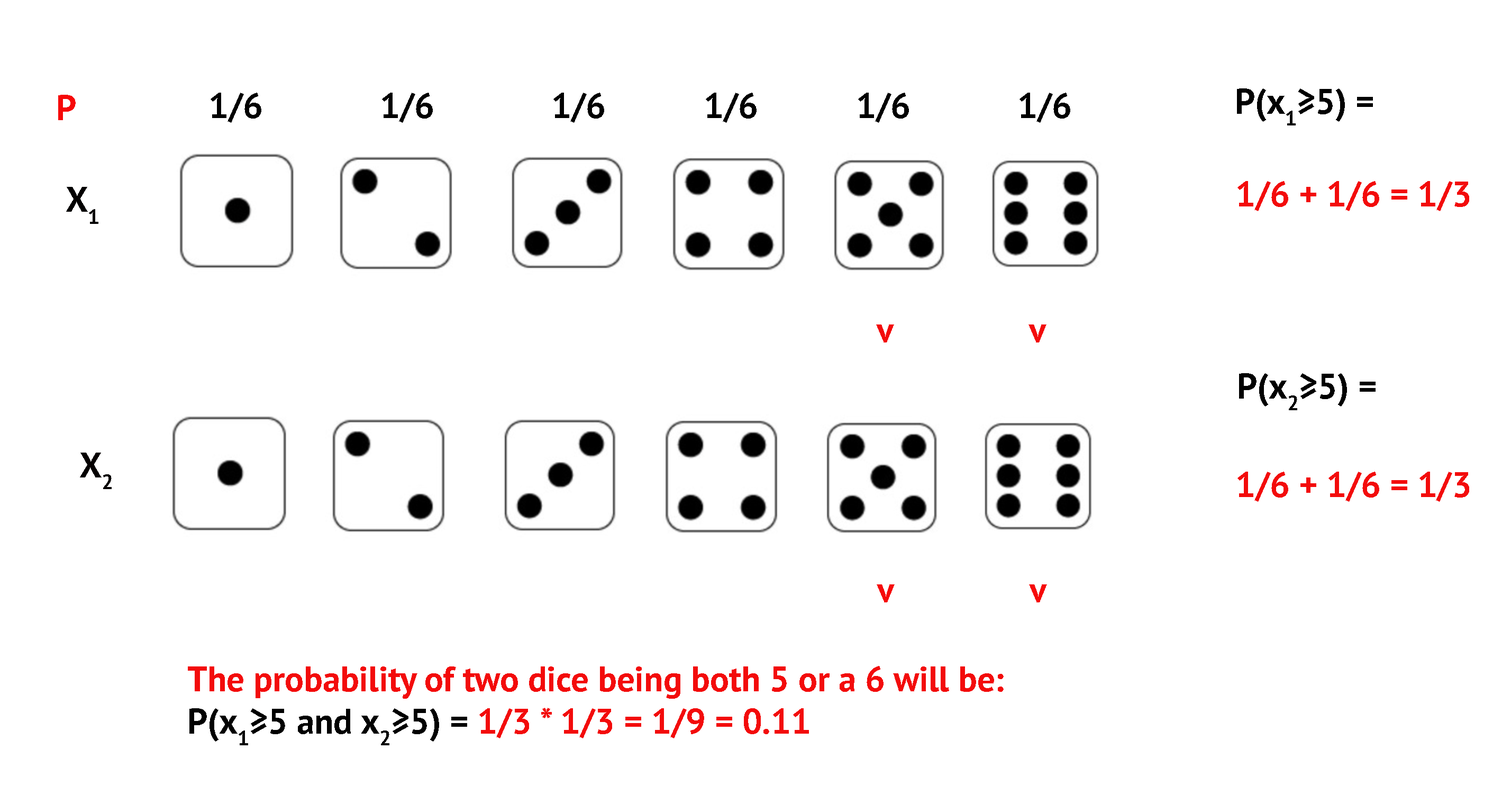
<style>
.page{position:relative;width:1502px;height:794px;background:#ffffff}
.page>*{position:absolute;margin:0}
.t1{font:35.3px "PTSans-Bold";color:#010101}
.t2{font:35.3px "PTSans-Bold";color:#f60808}
.t3{font:35.3px "PTSans-Bold";color:#000000}
.t4{font:35.3px "PTSans-Bold";color:#f30b0b}
.t5{font:35.3px "PTSans-Bold";color:#020000}
.t6{font:35.3px "PTSans-Bold";color:#040000}
.t7{font:35.3px "PTSans-Bold";color:#f60a0a}
</style>
<div class="page">
<p class="t1" style="left:1237px;top:88px;width:136px;height:37px">P(x1≥5) =</p>
<p class="t2" style="left:58px;top:95px;width:18px;height:25px">P</p>
<p class="t3" style="left:211px;top:93px;width:859px;height:30px">1/6       1/6       1/6      1/6      1/6       1/6</p>
<p class="t4" style="left:1238px;top:181px;width:231px;height:30px">1/6 + 1/6 = 1/3</p>
<p class="t5" style="left:66px;top:187px;width:32px;height:37px">X1</p>
<p class="t4" style="left:876px;top:324px;width:171px;height:18px">v        v</p>
<p class="t1" style="left:1239px;top:373px;width:137px;height:37px">P(x2≥5) =</p>
<p class="t6" style="left:80px;top:452px;width:32px;height:37px">X2</p>
<p class="t4" style="left:1238px;top:471px;width:231px;height:31px">1/6 + 1/6 = 1/3</p>
<p class="t7" style="left:877px;top:584px;width:170px;height:18px">v        v</p>
<p class="t4" style="left:188px;top:666px;width:816px;height:79px">The probability of two dice being both 5 or a 6 will be: <br><span class="t1">P(x1≥5 and x2≥5) = </span>1/3 * 1/3 = 1/9 = 0.11</p>
</div>
